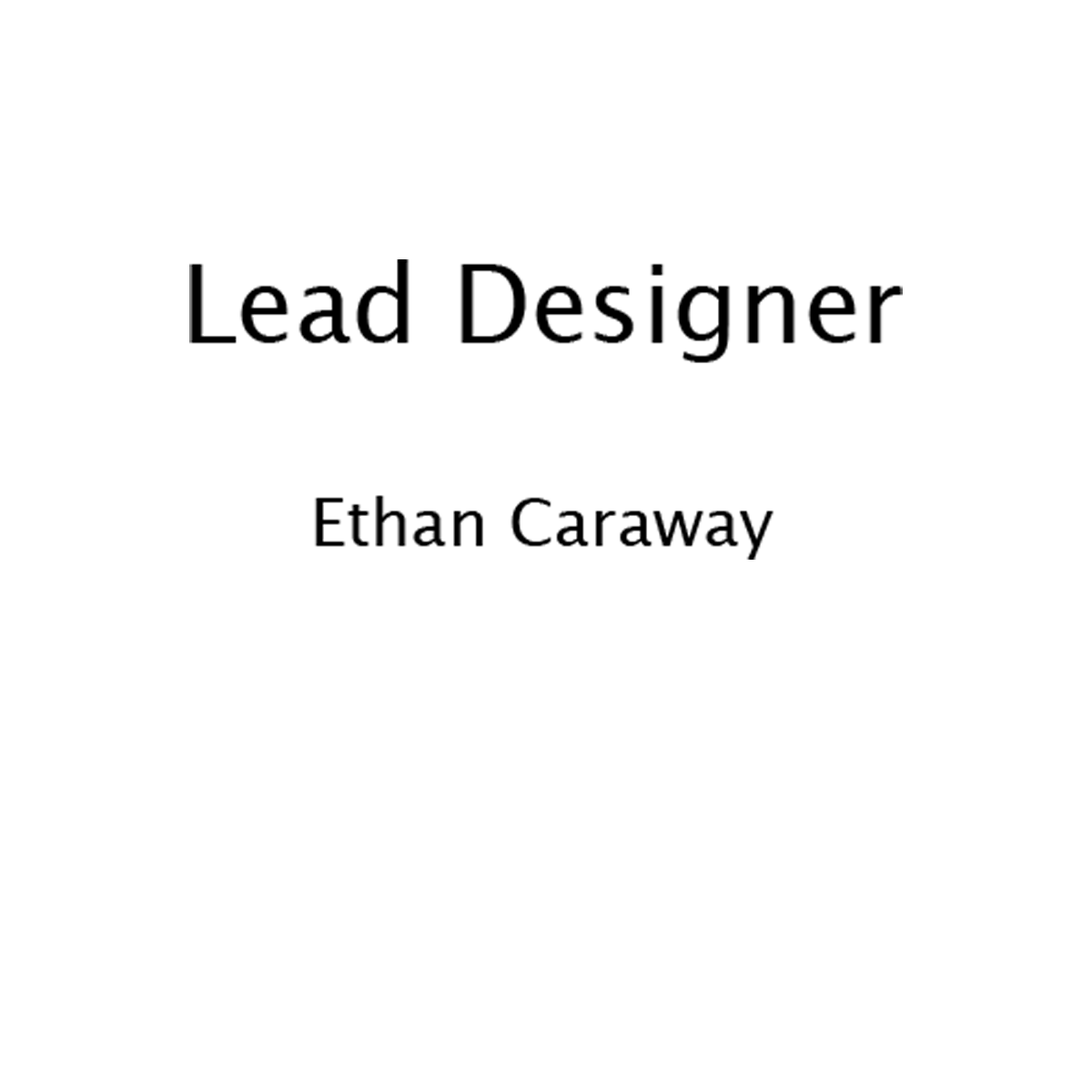
<style>
.page{position:relative;width:1092px;height:1092px;background:#ffffff}
.page>*{position:absolute;margin:0}
.t1{font:104.8px "LucidaGrande";color:#000000}
.t2{font:104.8px "LucidaGrande";color:#9b9b9b}
.t3{font:65.5px "LucidaGrande";color:#000000}
</style>
<div class="page">
<p class="t1" style="left:189px;top:259px;width:714px;height:301px;text-align:center"><span class="t2"><br><br></span>Lead Designer<br><br><span class="t3">Ethan Caraway</span></p>
</div>
